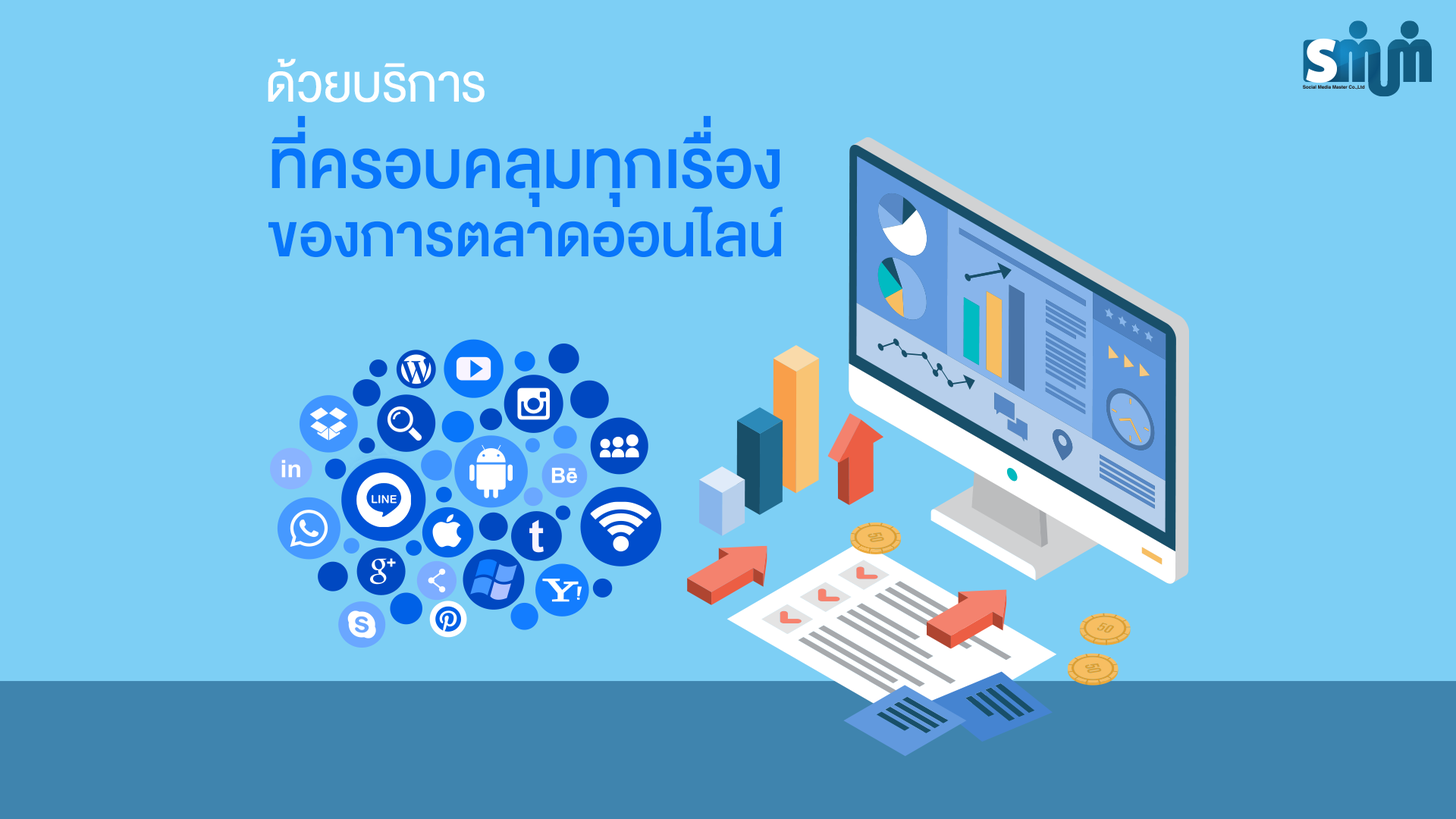
<style>
.page{position:relative;width:1456px;height:819px;background:#7dcff5}
.page>*{position:absolute;margin:0}
.t1{font:72.5px "DBHeavent";color:#ffffff}
.t2{font:94.6px/64.5px "DBHeavent-Med";color:#0876fa}
.t3{font:83.7px/68.7px "DBHeavent-Med";color:#0876fa}
</style>
<div class="page">
<p class="t1" style="left:268px;top:58px;width:217px;height:44px">ด้วยบริการ</p>
<p class="t2" style="left:268px;top:115px;width:515px;height:143px;text-align:center">ที่ครอบคลุมทุกเรื่อง<br><span class="t3">ของการตลาดออนไลน์</span></p>
</div>
